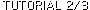
<style>
.page{position:relative;width:90px;height:10px;background:#ffffff}
.page>*{position:absolute;margin:0}
.t1{font:12px "Geneva";color:#000000}
</style>
<div class="page">
<p class="t1" style="left:3px;top:1px;width:85px;height:9px">TUTORIAL 2/3</p>
</div>
